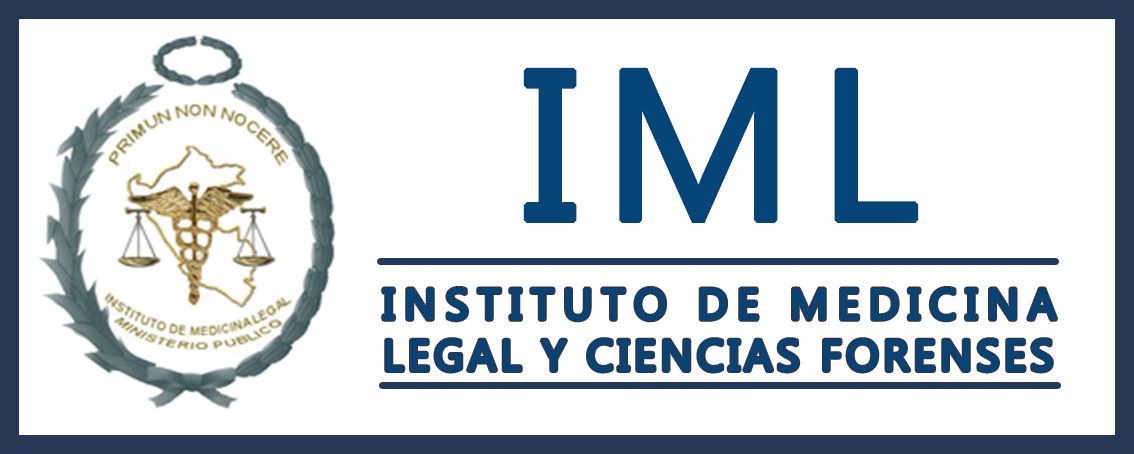
<style>
.page{position:relative;width:1134px;height:454px;background:#ffffff}
.page>*{position:absolute;margin:0}
.t1{font:213.4px "Ebrima";letter-spacing:0.085em;color:#044476;text-transform:uppercase;font-weight:bold}
.t2{font:42.7px "Ebrima";letter-spacing:0.085em;color:#044476;text-transform:uppercase;font-weight:bold}
.t3{font:42.7px "Ebrima";letter-spacing:0.2em;color:#044476;text-transform:uppercase;font-weight:bold}
</style>
<div class="page">
<p class="t1" style="left:523px;top:67px;width:396px;height:156px">iml</p>
<p class="t2" style="left:383px;top:288px;width:673px;height:84px"><span class="t3">instituto de medicina<br></span>legal y ciencias forenses</p>
</div>
